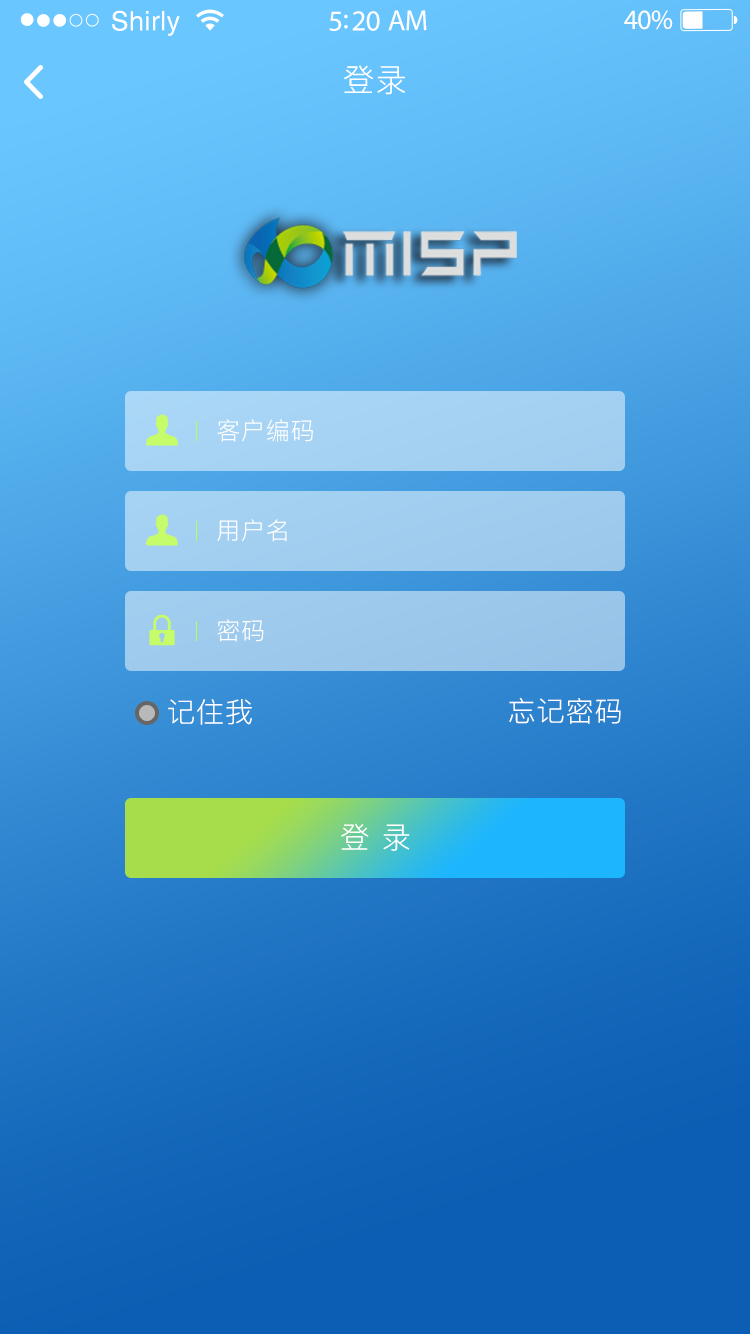
<style>
.page{position:relative;width:750px;height:1334px}
.page>*{position:absolute;margin:0}
.t1{font:26.8px "Helvetica";letter-spacing:0.02em;color:#ffffff}
.t2{font:29.1px "MyriadPro-Regular";letter-spacing:-0.02em;color:#ffffff}
.t3{font:27.9px "MyriadPro-Regular";letter-spacing:-0.02em;color:#ffffff}
.t4{font:32px "PingFang-SC-Regular";letter-spacing:0.03em;color:#ffffff}
.t5{font:24px "PingFang-SC-Regular";letter-spacing:0.03em;color:#ffffff}
.t6{font:28.1px "PingFang-SC-Regular";letter-spacing:0.03em;color:#ffffff}
.t7{font:30px "PingFang-SC-Regular";letter-spacing:0.03em;color:#ffffff}
</style>
<div class="page">
<p class="t1" style="left:112px;top:10px;width:68px;height:26px">Shirly</p>
<p class="t2" style="left:329px;top:10px;width:98px;height:21px">5:20 AM</p>
<p class="t3" style="left:624px;top:10px;width:49px;height:20px">40%</p>
<p class="t4" style="left:343px;top:65px;width:62px;height:30px">登录</p>
<p class="t5" style="left:217px;top:419px;width:96px;height:23px">客户编码</p>
<p class="t5" style="left:217px;top:519px;width:70px;height:23px">用户名</p>
<p class="t5" style="left:217px;top:619px;width:47px;height:23px">密码</p>
<p class="t6" style="left:168px;top:699px;width:84px;height:26px">记住我</p>
<p class="t6" style="left:509px;top:697px;width:112px;height:27px">忘记密码</p>
<p class="t7" style="left:341px;top:823px;width:69px;height:28px">登 录</p>
</div>
